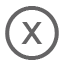
<style>
.page{position:relative;width:64px;height:64px;background:#ffffff}
.page>*{position:absolute;margin:0}
.t1{font:64px "ArialUnicodeMS";color:#656465}
</style>
<div class="page">
<p class="t1" style="left:5px;top:6px;width:54px;height:54px">ⓧ</p>
</div>
